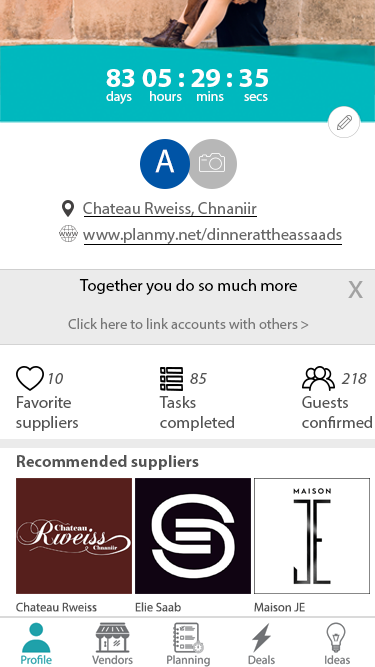
<style>
.page{position:relative;width:375px;height:667px;background:#ffffff}
.page>*{position:absolute;margin:0}
.t1{font:27.3px "MyriadPro-Bold";color:#ffffff}
.t2{font:13.6px "MyriadPro-Regular";color:#ffffff}
.t3{font:33.3px "MyriadPro-Regular";color:#ffffff}
.t4{font:16.7px "MyriadPro-Regular";color:#686868}
.t5{font:14.6px "MyriadPro-Regular";color:#777777}
.t6{font:16.7px "MyriadPro-Regular";color:#000000}
.t7{font:33.3px "MyriadPro-Regular";color:#a2a2a2}
.t8{font:16.7px "MyriadPro-It";color:#545454}
.t9{font:16.7px "MyriadPro-Regular";color:#545454}
.t10{font:16.7px "MyriadPro-Bold";color:#545454}
.t11{font:12.5px "MyriadPro-Regular";color:#545454}
</style>
<div class="page">
<p class="t1" style="left:106px;top:69px;width:162px;height:18px">83 05 : 29 : 35</p>
<p class="t2" style="left:106px;top:91px;width:162px;height:13px">days      hours     mins       secs</p>
<p class="t3" style="left:155px;top:149px;width:20px;height:24px">A</p>
<p class="t4" style="left:83px;top:202px;width:174px;height:15px">Chateau Rweiss, Chnaniir</p>
<p class="t4" style="left:83px;top:228px;width:259px;height:16px">www.planmy.net/dinnerattheassaads</p>
<p class="t5" style="left:68px;top:279px;width:241px;height:50px;text-align:center"><span class="t6">Together you do so much more<br><br></span>Click here to link accounts with others &gt;</p>
<p class="t7" style="left:348px;top:281px;width:15px;height:17px">x</p>
<p class="t8" style="left:49px;top:373px;width:14px;height:11px">10</p>
<p class="t8" style="left:190px;top:373px;width:17px;height:11px">85</p>
<p class="t8" style="left:341px;top:373px;width:26px;height:11px">218</p>
<p class="t9" style="left:16px;top:396px;width:62px;height:35px">Favorite<br>suppliers</p>
<p class="t9" style="left:159px;top:396px;width:75px;height:35px">Tasks<br>completed</p>
<p class="t9" style="left:302px;top:396px;width:70px;height:32px">Guests<br>confirmed</p>
<p class="t10" style="left:17px;top:455px;width:182px;height:15px">Recommended suppliers</p>
<p class="t11" style="left:16px;top:602px;width:81px;height:10px">Chateau Rweiss</p>
<p class="t11" style="left:135px;top:602px;width:46px;height:10px">Elie Saab</p>
<p class="t11" style="left:254px;top:602px;width:51px;height:10px">Maison JE</p>
</div>
